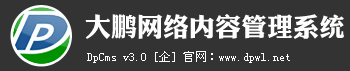
<style>
.page{position:relative;width:350px;height:71px;background:#333333}
.page>*{position:absolute;margin:0}
.t1{font:26px "DFPLiJinHeiW8";color:#fefefe}
.t2{font:12px "NSimSun";color:#fefefe}
</style>
<div class="page">
<p class="t1" style="left:85px;top:14px;width:259px;height:25px">大鹏网络内容管理系统</p>
<p class="t2" style="left:87px;top:51px;width:203px;height:12px">DpCms v3.0 [企] 官网：www.dpwl.net</p>
</div>
